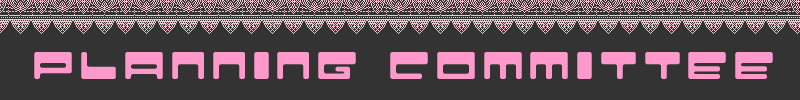
<style>
.page{position:relative;width:800px;height:100px;background:#333333}
.page>*{position:absolute;margin:0}
.t1{font:36px "SHOWA73ARegular";color:#ff99cc}
</style>
<div class="page">
<p class="t1" style="left:34px;top:52px;width:739px;height:27px">PLANNING COMMITTEE</p>
</div>
